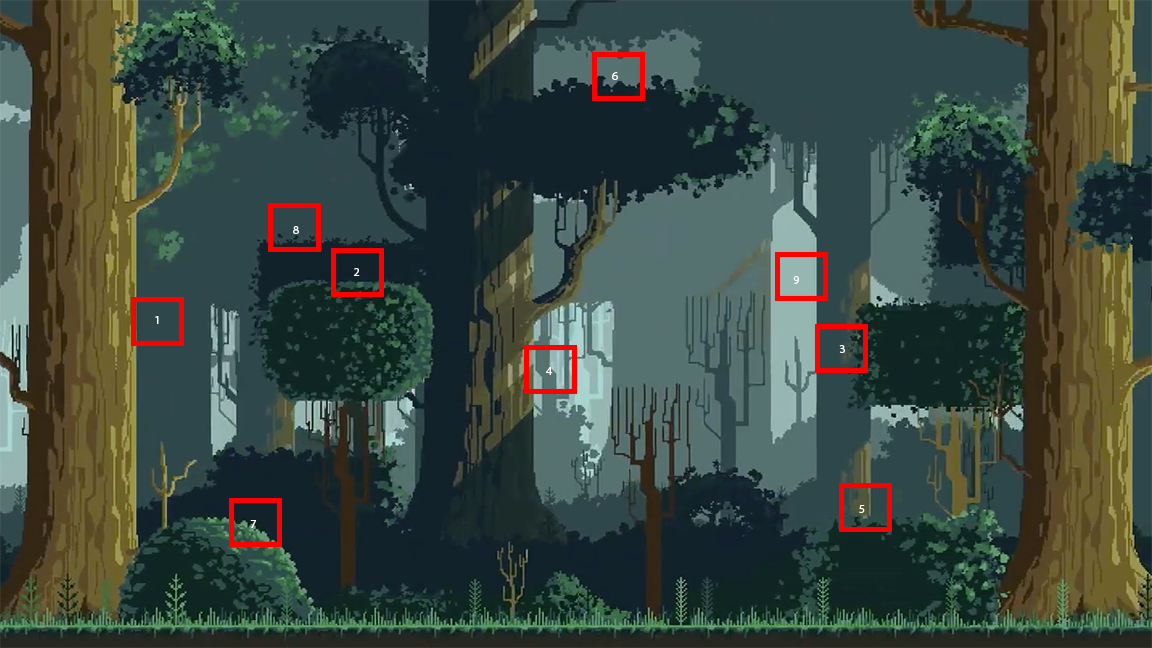
<style>
.page{position:relative;width:1152px;height:648px}
.page>*{position:absolute;margin:0}
.t1{font:12px "MyriadPro-Regular";color:#ffffff}
</style>
<div class="page">
<p class="t1" style="left:612px;top:72px;width:6px;height:8px">6</p>
<p class="t1" style="left:293px;top:226px;width:6px;height:8px">8</p>
<p class="t1" style="left:354px;top:268px;width:6px;height:8px">2</p>
<p class="t1" style="left:793px;top:276px;width:6px;height:8px">9</p>
<p class="t1" style="left:155px;top:316px;width:4px;height:8px">1</p>
<p class="t1" style="left:839px;top:345px;width:6px;height:8px">3</p>
<p class="t1" style="left:546px;top:367px;width:7px;height:8px">4</p>
<p class="t1" style="left:859px;top:505px;width:6px;height:8px">5</p>
<p class="t1" style="left:250px;top:520px;width:6px;height:8px">7</p>
</div>
